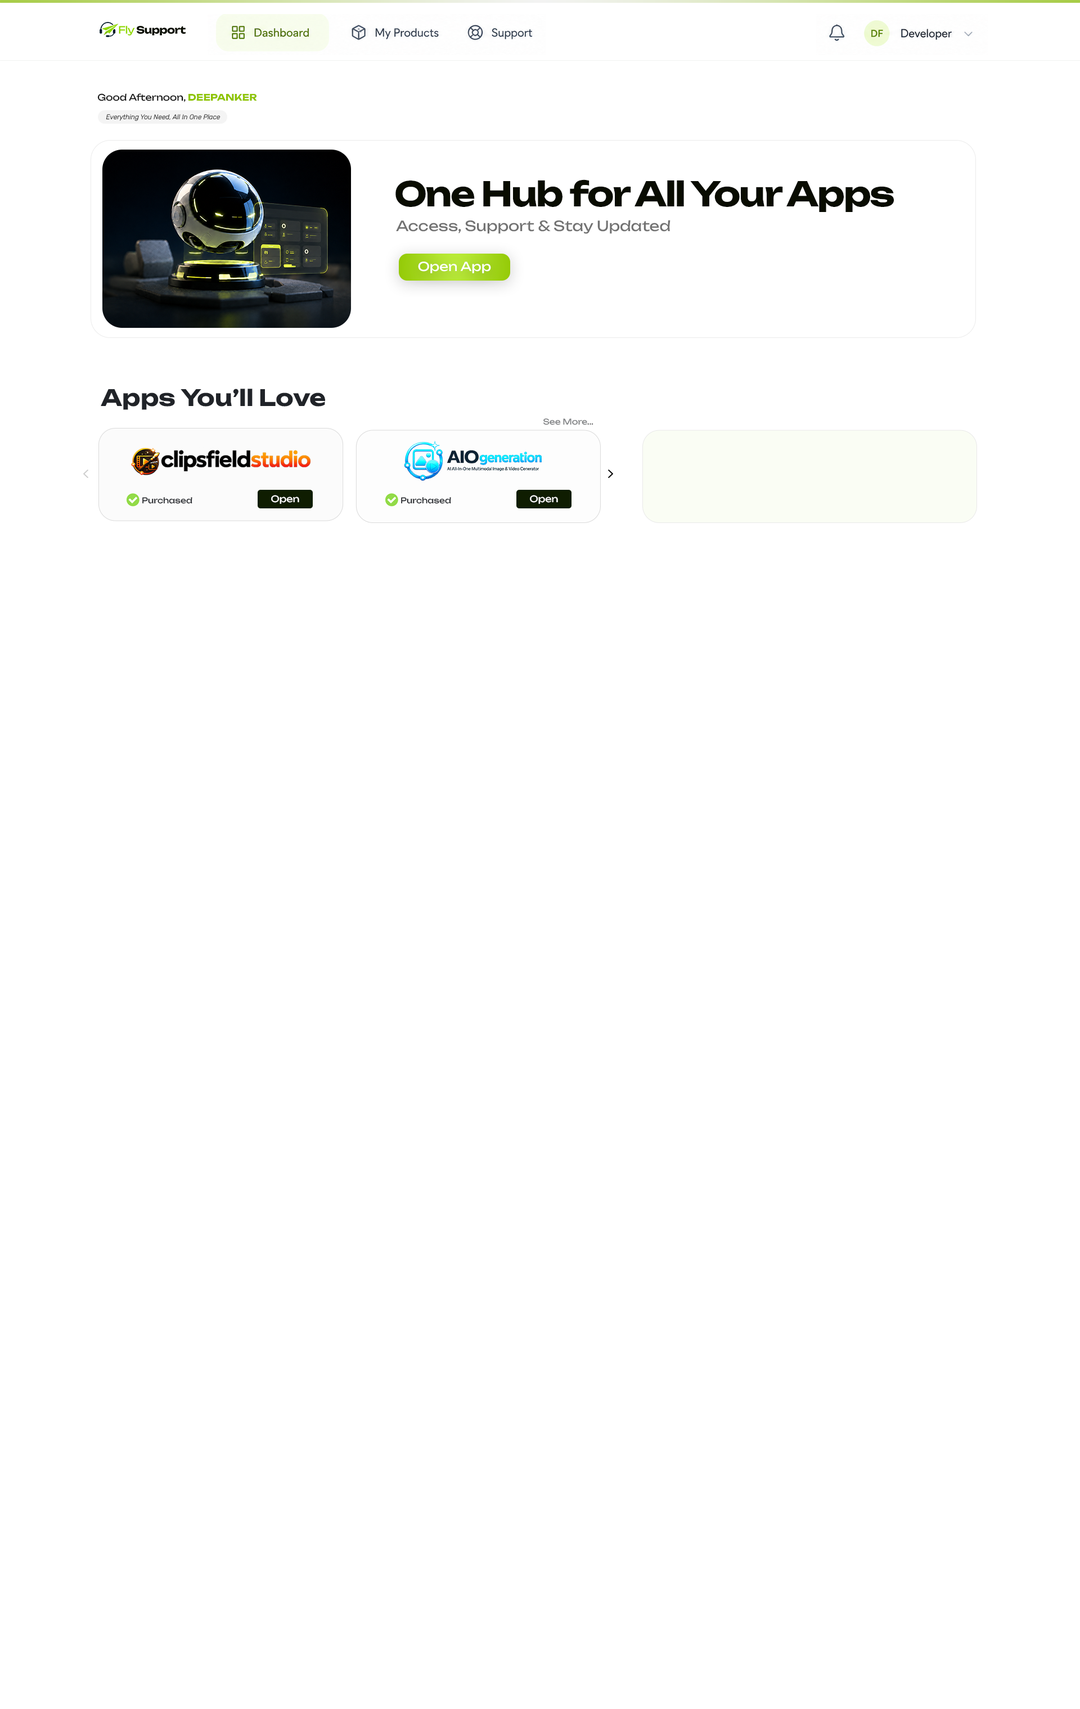
<style>
.page{position:relative;width:1080px;height:1709px;background:#ffffff}
.page>*{position:absolute;margin:0}
.t1{font:9px "Unbounded-Regular";color:#111111}
.t2{font:9px "Unbounded-Bold";color:#8ec400}
.t3{font:6.8px "Rubik-LightItalic";color:#1a1a1a}
.t4{font:33.8px "Unbounded-Bold";letter-spacing:-0.04em;color:#090c01}
.t5{font:14.1px "Unbounded-Regular";color:#727272}
.t6{font:12.4px "Unbounded-Regular";color:#ffffff}
.t7{font:22.5px "Unbounded-Bold";color:#202328}
.t8{font:7.9px "Unbounded-Regular";color:#7e8082}
.t9{font:7.9px "Unbounded-Regular";color:#606162}
.t10{font:7.9px "Unbounded-Regular";color:#202328}
.t11{font:9px "Unbounded-Regular";color:#ffffff}
</style>
<div class="page">
<p class="t1" style="left:97px;top:93px;width:160px;height:9px">Good Afternoon, <span class="t2">DEEPANKER</span></p>
<p class="t3" style="left:106px;top:114px;width:114px;height:7px">Everything You Need, All In One Place</p>
<p class="t4" style="left:395px;top:179px;width:499px;height:33px">One Hub for All Your Apps</p>
<p class="t5" style="left:396px;top:220px;width:274px;height:14px">Access, Support &amp; Stay Updated</p>
<p class="t6" style="left:418px;top:262px;width:73px;height:11px">Open App</p>
<p class="t7" style="left:101px;top:389px;width:224px;height:21px">Apps You’ll Love</p>
<p class="t8" style="left:543px;top:418px;width:50px;height:7px">See More<span class="t9">...</span></p>
<p class="t10" style="left:142px;top:497px;width:50px;height:7px">Purchased</p>
<p class="t11" style="left:271px;top:495px;width:28px;height:9px">Open</p>
<p class="t10" style="left:401px;top:497px;width:50px;height:7px">Purchased</p>
<p class="t11" style="left:530px;top:495px;width:28px;height:9px">Open</p>
</div>
